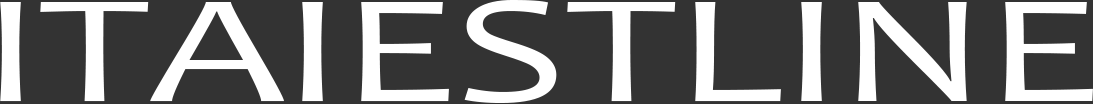
<style>
.page{position:relative;width:1093px;height:104px;background:#333333}
.page>*{position:absolute;margin:0}
.t1{font:154.5px "Candara";letter-spacing:-0.01em;color:#ffffff;scale:1.43 1}
</style>
<div class="page">
<p class="t1" style="left:0px;top:0px;width:1093px;height:103px">ITAIESTLINE</p>
</div>
